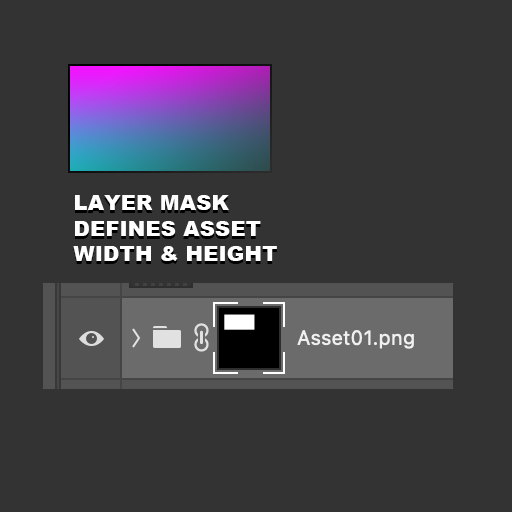
<style>
.page{position:relative;width:512px;height:512px;background:#333333}
.page>*{position:absolute;margin:0}
.t1{font:21.2px "Arial-Black";color:#ffffff}
</style>
<div class="page">
<p class="t1" style="left:73px;top:195px;width:204px;height:66px">LAYER MASK<br>DEFINES ASSET <br>WIDTH &amp; HEIGHT</p>
</div>
